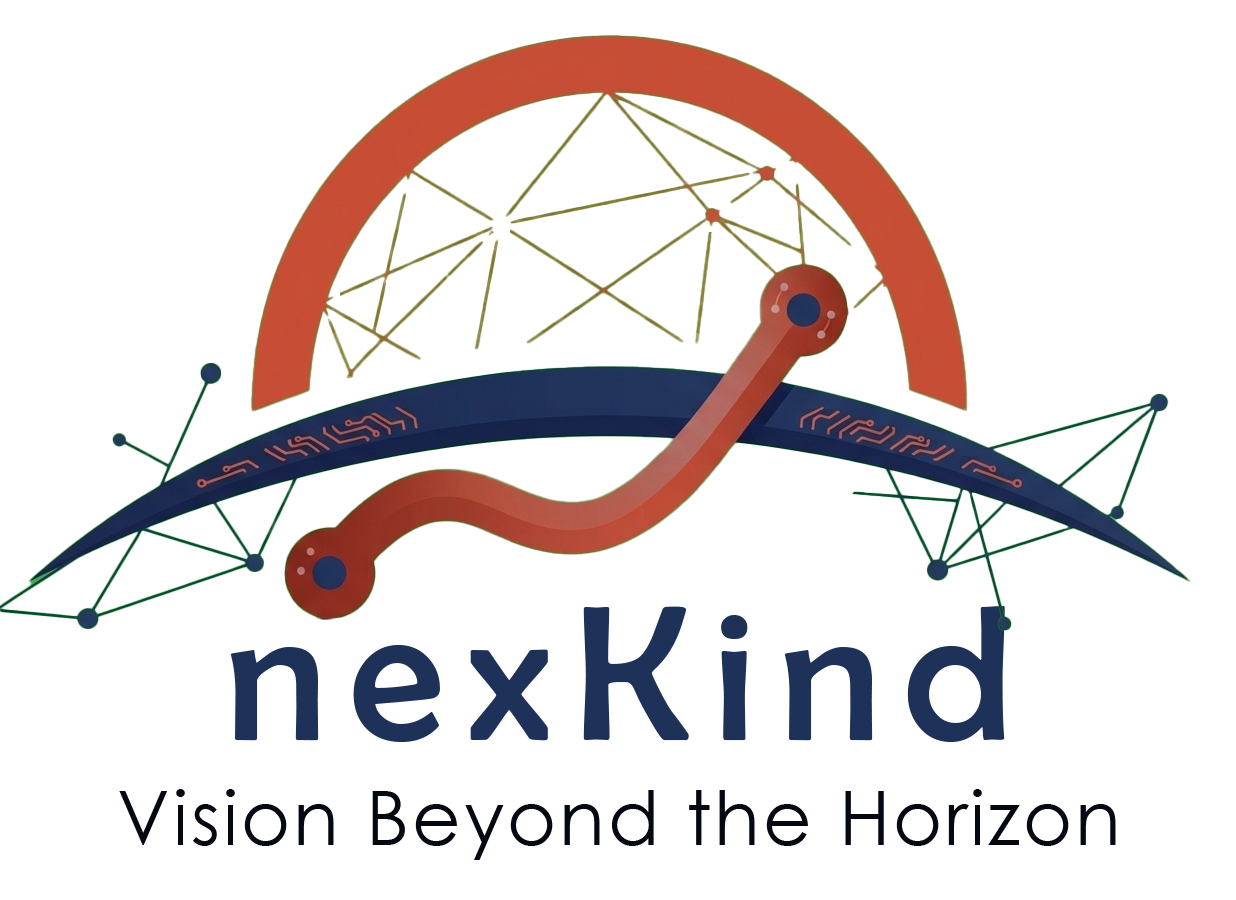
<style>
.page{position:relative;width:1236px;height:900px;background:#ffffff}
.page>*{position:absolute;margin:0}
.t1{font:194px "BerlinSansFB-Reg";letter-spacing:0.12em;color:#1e3159}
.t2{font:75px "CenturyGothic";letter-spacing:0.04em;color:#040810}
</style>
<div class="page">
<p class="t1" style="left:230px;top:606px;width:775px;height:136px">nexKind</p>
<p class="t2" style="left:119px;top:789px;width:997px;height:71px">Vision Beyond the Horizon</p>
</div>
